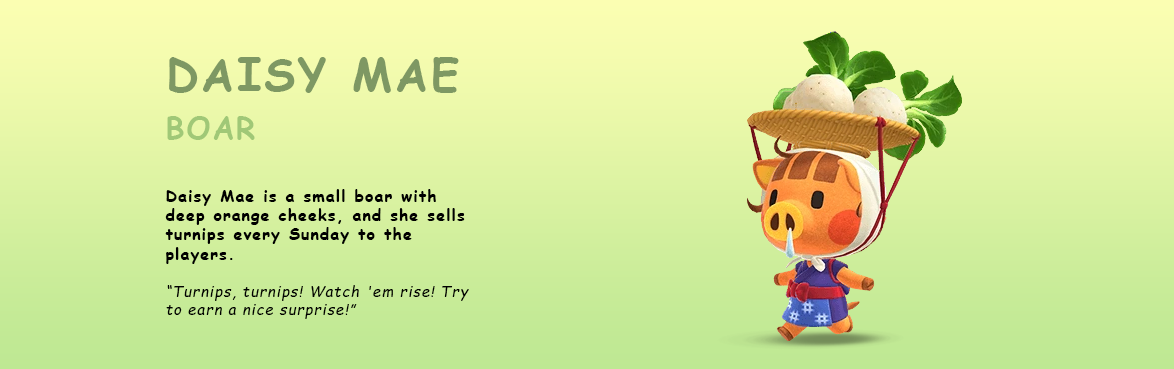
<style>
.page{position:relative;width:1174px;height:369px}
.page>*{position:absolute;margin:0}
.t1{font:45px/48px "ComicSansMS-Bold";letter-spacing:0.065em;color:#7e9863}
.t2{font:30px/48px "ComicSansMS-Bold";letter-spacing:0.065em;color:#a0c877}
.t3{font:16px "ComicSansMS-Bold";letter-spacing:0.065em;color:#000000}
.t4{font:15px "ComicSansMS-Italic";letter-spacing:0.065em;color:#000000}
</style>
<div class="page">
<p class="t1" style="left:167px;top:57px;width:292px;height:83px">DAISY MAE<br><span class="t2">BOAR</span></p>
<p class="t3" style="left:165px;top:189px;width:304px;height:130px">Daisy Mae is a small boar with deep orange cheeks, and she sells turnips every Sunday to the players.<br><br><span class="t4">“Turnips, turnips! Watch 'em rise! Try to earn a nice surprise!”</span></p>
</div>
